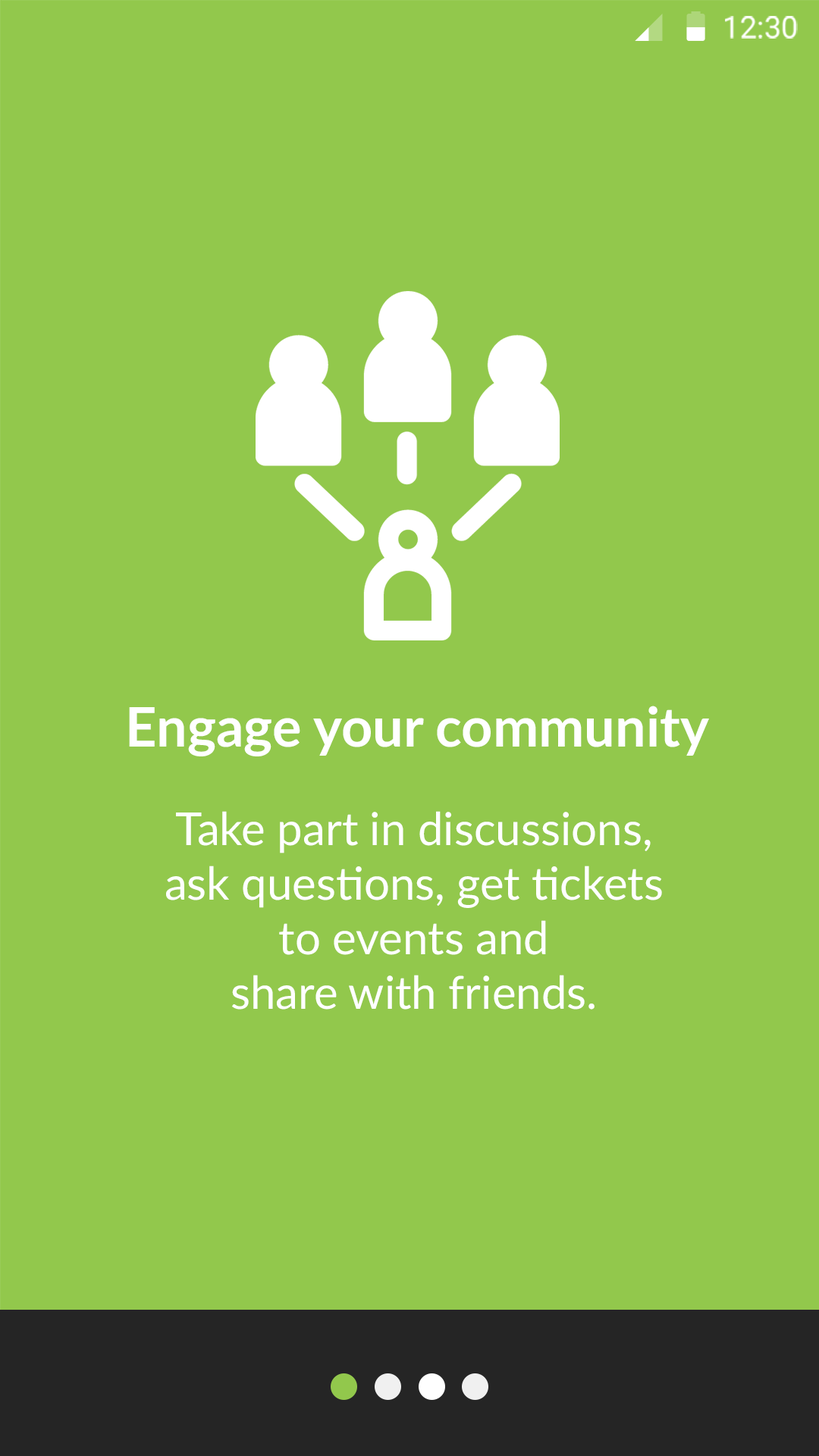
<style>
.page{position:relative;width:819px;height:1456px;background:#92c84c}
.page>*{position:absolute;margin:0}
.t1{font:30.3px "Roboto-Regular";color:#ffffff}
.t2{font:54.6px "Lato-Bold";color:#ffffff}
.t3{font:45.5px "Lato-Regular";color:#ffffff}
</style>
<div class="page">
<p class="t1" style="left:725px;top:16px;width:73px;height:23px">12:30</p>
<p class="t2" style="left:129px;top:706px;width:580px;height:51px">Engage your community</p>
<p class="t3" style="left:166px;top:811px;width:496px;height:199px;text-align:center">Take part in discussions, <br>ask questions, get tickets to events and <br>share with friends.</p>
</div>
